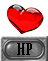
<style>
.page{position:relative;width:48px;height:61px;background:#ffffff}
.page>*{position:absolute;margin:0}
.t1{font:19px "TimesNewRomanPS-BoldMT";letter-spacing:0.2em;color:#000000;scale:0.54 1}
</style>
<div class="page">
<p class="t1" style="left:17px;top:43px;width:15px;height:12px">HP</p>
</div>
